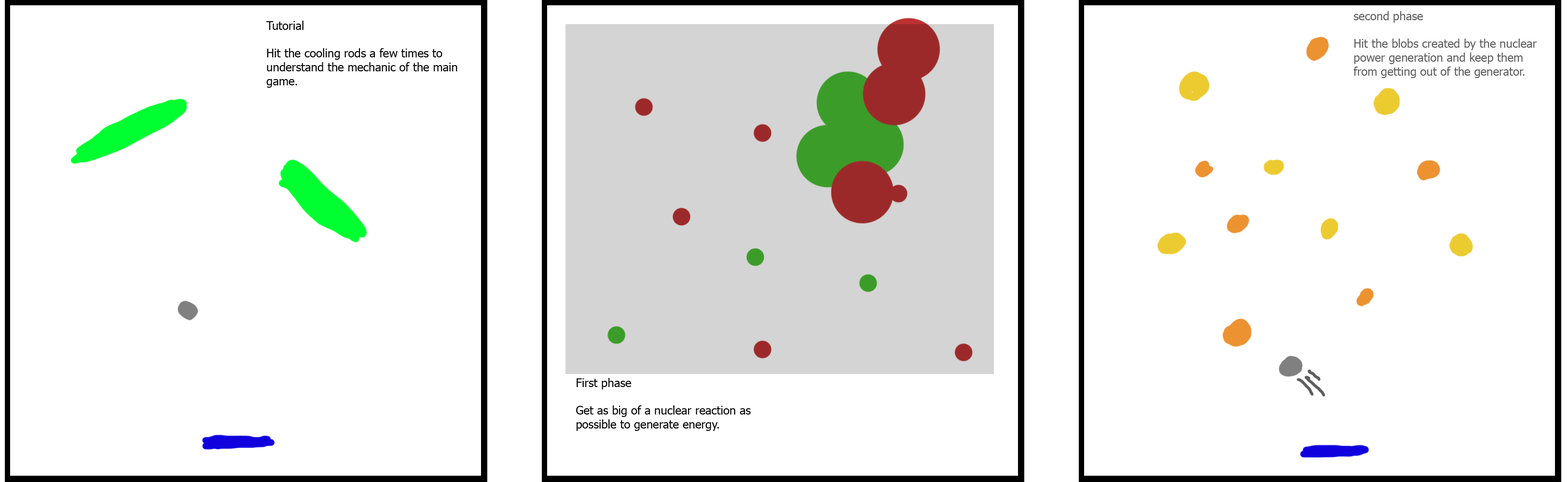
<style>
.page{position:relative;width:1568px;height:482px;background:#ffffff}
.page>*{position:absolute;margin:0}
.t1{font:11.6px "Tahoma";color:#5c5c5c}
.t2{font:11.6px "Tahoma";color:#000000}
</style>
<div class="page">
<p class="t1" style="left:1353px;top:11px;width:184px;height:67px">second phase<br><br>Hit the blobs created by the nuclear power generation and keep them from getting out of the generator.</p>
<p class="t2" style="left:266px;top:21px;width:191px;height:67px">Tutorial<br><br>Hit the cooling rods a few times to understand the mechanic of the main game.</p>
<p class="t2" style="left:576px;top:378px;width:175px;height:53px">First phase<br><br>Get as big of a nuclear reaction as possible to generate energy.</p>
</div>
